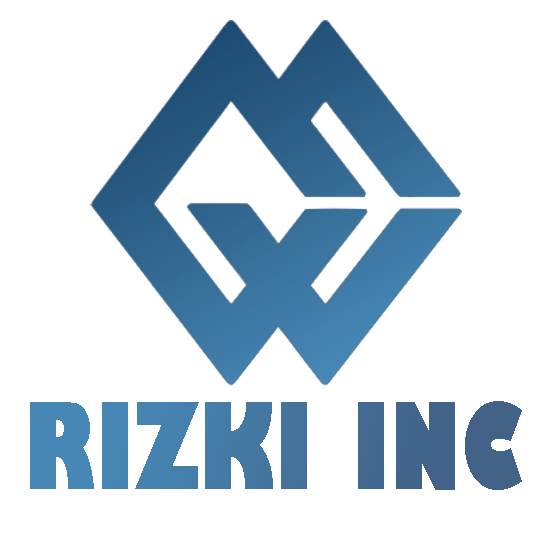
<style>
.page{position:relative;width:552px;height:552px;background:#ffffff}
.page>*{position:absolute;margin:0}
.t1{font:117.1px "GillSans-UltraBoldCondensed";color:#4477a2}
</style>
<div class="page">
<p class="t1" style="left:30px;top:401px;width:492px;height:89px">RIZKI INC</p>
</div>
